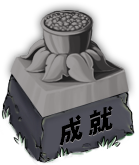
<style>
.page{position:relative;width:139px;height:165px;background:#ffffff}
.page>*{position:absolute;margin:0}
.t1{font:28.8px "MaokenAssortedSansBold-Regular";letter-spacing:0.14em;color:#000000;text-transform:uppercase;scale:1.04 1}
</style>
<div class="page">
<p class="t1" style="left:59px;top:106px;width:54px;height:40px;rotate:-19deg">成就</p>
</div>
